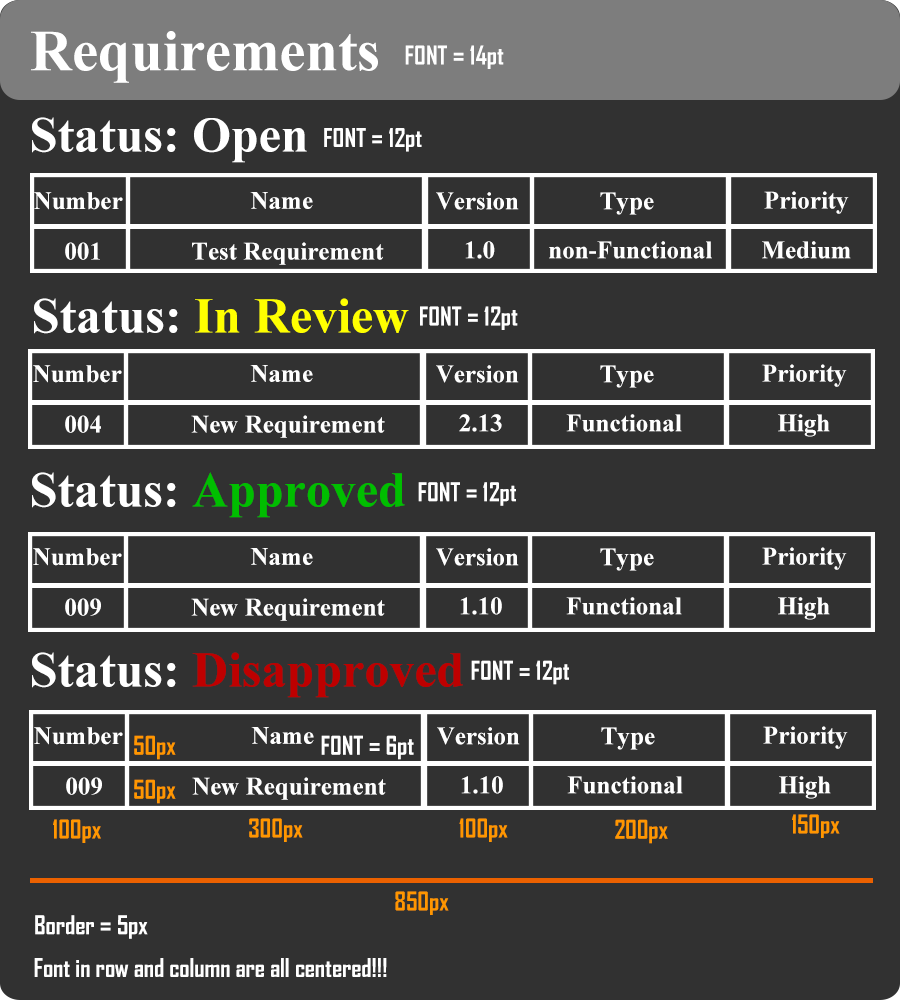
<style>
.page{position:relative;width:900px;height:1000px;background:#313131}
.page>*{position:absolute;margin:0}
.t1{font:58.3px "TimesNewRomanPS-BoldMT";color:#ffffff}
.t2{font:25px "AgencyFB-Bold";color:#ffffff}
.t3{font:50px "TimesNewRomanPS-BoldMT";color:#ffffff}
.t4{font:25px "TimesNewRomanPS-BoldMT";color:#ffffff}
.t5{font:50px "TimesNewRomanPS-BoldMT";color:#ffff00}
.t6{font:50px "TimesNewRomanPS-BoldMT";color:#00be00}
.t7{font:50px "TimesNewRomanPS-BoldMT";color:#be0000}
.t8{font:25px "AgencyFB-Bold";color:#ff9600}
</style>
<div class="page">
<p class="t1" style="left:31px;top:31px;width:347px;height:52px">Requirements</p>
<p class="t2" style="left:405px;top:45px;width:99px;height:24px">FONT = 14pt</p>
<p class="t3" style="left:32px;top:117px;width:275px;height:46px">Status: Open</p>
<p class="t2" style="left:324px;top:128px;width:98px;height:24px">FONT = 12pt</p>
<p class="t4" style="left:34px;top:192px;width:89px;height:18px">Number</p>
<p class="t4" style="left:250px;top:192px;width:63px;height:17px">Name</p>
<p class="t4" style="left:436px;top:192px;width:83px;height:18px">Version</p>
<p class="t4" style="left:600px;top:192px;width:54px;height:23px">Type</p>
<p class="t4" style="left:764px;top:191px;width:85px;height:23px">Priority</p>
<p class="t4" style="left:65px;top:242px;width:35px;height:18px">001</p>
<p class="t4" style="left:192px;top:242px;width:192px;height:23px">Test Requirement</p>
<p class="t4" style="left:465px;top:241px;width:30px;height:18px">1.0</p>
<p class="t4" style="left:549px;top:241px;width:163px;height:18px">non-Functional</p>
<p class="t4" style="left:762px;top:241px;width:89px;height:18px">Medium</p>
<p class="t5" style="left:34px;top:298px;width:375px;height:36px"><span class="t3">Status: </span>In Review</p>
<p class="t2" style="left:420px;top:306px;width:98px;height:24px">FONT = 12pt</p>
<p class="t4" style="left:33px;top:365px;width:89px;height:18px">Number</p>
<p class="t4" style="left:250px;top:365px;width:63px;height:17px">Name</p>
<p class="t4" style="left:436px;top:365px;width:83px;height:18px">Version</p>
<p class="t4" style="left:600px;top:365px;width:54px;height:23px">Type</p>
<p class="t4" style="left:762px;top:364px;width:85px;height:23px">Priority</p>
<p class="t4" style="left:459px;top:414px;width:43px;height:18px">2.13</p>
<p class="t4" style="left:566px;top:414px;width:116px;height:18px">Functional</p>
<p class="t4" style="left:778px;top:414px;width:52px;height:23px">High</p>
<p class="t4" style="left:65px;top:415px;width:36px;height:18px">004</p>
<p class="t4" style="left:191px;top:415px;width:194px;height:23px">New Requirement</p>
<p class="t6" style="left:32px;top:472px;width:373px;height:46px"><span class="t3">Status: </span>Approved</p>
<p class="t2" style="left:418px;top:482px;width:98px;height:24px">FONT = 12pt</p>
<p class="t4" style="left:33px;top:548px;width:89px;height:18px">Number</p>
<p class="t4" style="left:250px;top:548px;width:63px;height:17px">Name</p>
<p class="t4" style="left:436px;top:548px;width:83px;height:18px">Version</p>
<p class="t4" style="left:600px;top:548px;width:54px;height:23px">Type</p>
<p class="t4" style="left:762px;top:547px;width:85px;height:23px">Priority</p>
<p class="t4" style="left:65px;top:598px;width:36px;height:18px">009</p>
<p class="t4" style="left:191px;top:598px;width:194px;height:23px">New Requirement</p>
<p class="t4" style="left:460px;top:597px;width:42px;height:18px">1.10</p>
<p class="t4" style="left:566px;top:597px;width:116px;height:18px">Functional</p>
<p class="t4" style="left:778px;top:597px;width:52px;height:23px">High</p>
<p class="t7" style="left:32px;top:652px;width:431px;height:46px"><span class="t3">Status: </span>Disapproved</p>
<p class="t2" style="left:471px;top:660px;width:98px;height:25px">FONT = 12pt</p>
<p class="t4" style="left:763px;top:726px;width:85px;height:23px">Priority</p>
<p class="t4" style="left:34px;top:727px;width:89px;height:18px">Number</p>
<p class="t8" style="left:134px;top:735px;width:42px;height:25px">50px</p>
<p class="t4" style="left:251px;top:727px;width:63px;height:17px">Name</p>
<p class="t2" style="left:321px;top:735px;width:93px;height:25px">FONT = 6pt</p>
<p class="t4" style="left:437px;top:727px;width:83px;height:18px">Version</p>
<p class="t4" style="left:601px;top:727px;width:54px;height:23px">Type</p>
<p class="t4" style="left:66px;top:777px;width:36px;height:18px">009</p>
<p class="t8" style="left:134px;top:779px;width:42px;height:25px">50px</p>
<p class="t4" style="left:192px;top:777px;width:194px;height:23px">New Requirement</p>
<p class="t4" style="left:461px;top:776px;width:42px;height:18px">1.10</p>
<p class="t4" style="left:567px;top:776px;width:116px;height:18px">Functional</p>
<p class="t4" style="left:779px;top:776px;width:52px;height:23px">High</p>
<p class="t8" style="left:53px;top:819px;width:48px;height:24px">100px</p>
<p class="t8" style="left:249px;top:818px;width:54px;height:24px">300px</p>
<p class="t8" style="left:459px;top:818px;width:49px;height:24px">100px</p>
<p class="t8" style="left:615px;top:819px;width:53px;height:25px">200px</p>
<p class="t8" style="left:792px;top:814px;width:48px;height:24px">150px</p>
<p class="t8" style="left:395px;top:891px;width:54px;height:24px">850px</p>
<p class="t2" style="left:35px;top:915px;width:113px;height:24px">Border = 5px</p>
<p class="t2" style="left:34px;top:958px;width:353px;height:19px">Font in row and column are all centered!!!</p>
</div>
